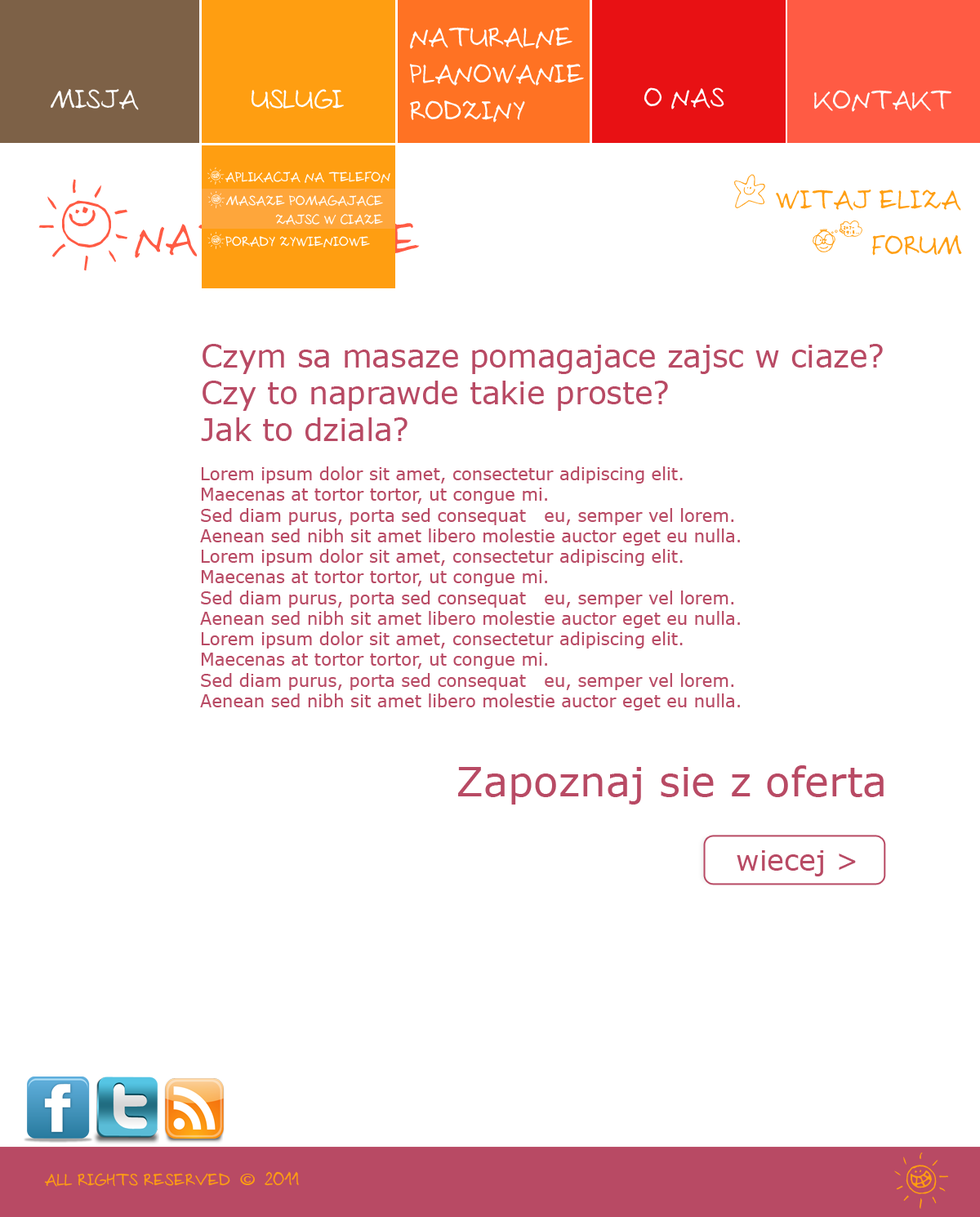
<style>
.page{position:relative;width:980px;height:1217px;background:#ffffff}
.page>*{position:absolute;margin:0}
.t1{font:30.6px "Sloneczko";color:#ffffff}
.t2{font:30.6px "Sloneczko";color:#fdfdfd}
.t3{font:15.6px "Sloneczko";color:#ffffff}
.t4{font:30.6px "Sloneczko";color:#ff9e11}
.t5{font:37.4px "Sloneczko";color:#ff9e11}
.t6{font:50.1px "Sloneczko"}
.t7{font:81.7px "Sloneczko"}
.t8{font:30.6px "Verdana";color:#b84a64}
.t9{font:17.3px "Verdana";color:#b84a64}
.t10{font:40.8px "Verdana";color:#b84a64}
.t11{font:28.4px "Verdana";color:#b84a64}
.t12{font:50.6px "Sloneczko";color:#ff9e11}
.t13{font:19.2px "Sloneczko";color:#ff9e11}
.t14{font:19.2px "CacophonyLoud";color:#ff9e11}
</style>
<div class="page">
<p class="t1" style="left:409px;top:27px;width:175px;height:95px">naturalne<br>planowanie<br>rodziny</p>
<p class="t1" style="left:51px;top:89px;width:88px;height:21px">misja</p>
<p class="t1" style="left:251px;top:89px;width:93px;height:20px">uslugi</p>
<p class="t1" style="left:644px;top:87px;width:80px;height:22px">o nas</p>
<p class="t2" style="left:814px;top:90px;width:137px;height:22px">kontakt</p>
<p class="t3" style="left:207px;top:167px;width:183px;height:18px">*aplikacja na telefon</p>
<p class="t4" style="left:734px;top:174px;width:227px;height:37px"><span class="t5">L</span> witaj eliza</p>
<p class="t6" style="left:38px;top:179px;width:382px;height:92px"><span class="t7">A</span>naturalnie</p>
<p class="t3" style="left:207px;top:191px;width:176px;height:34px;text-align:right">*masaze pomagajace<br>zajsc w ciaze</p>
<p class="t4" style="left:813px;top:220px;width:149px;height:36px"><span class="t5">S</span> forum</p>
<p class="t3" style="left:207px;top:231px;width:163px;height:18px">*porady zywieniowe</p>
<p class="t8" style="left:201px;top:344px;width:682px;height:97px">Czym sa masaze pomagajace zajsc w ciaze?<br>Czy to naprawde takie proste?<br>Jak to dziala?</p>
<p class="t9" style="left:200px;top:466px;width:540px;height:80px">Lorem ipsum dolor sit amet, consectetur adipiscing elit. <br>Maecenas at tortor tortor, ut congue mi. <br>Sed diam purus, porta sed consequat   eu, semper vel lorem. <br>Aenean sed nibh sit amet libero molestie auctor eget eu nulla.</p>
<p class="t9" style="left:200px;top:549px;width:540px;height:79px">Lorem ipsum dolor sit amet, consectetur adipiscing elit. <br>Maecenas at tortor tortor, ut congue mi. <br>Sed diam purus, porta sed consequat   eu, semper vel lorem. <br>Aenean sed nibh sit amet libero molestie auctor eget eu nulla.</p>
<p class="t9" style="left:200px;top:631px;width:540px;height:79px">Lorem ipsum dolor sit amet, consectetur adipiscing elit. <br>Maecenas at tortor tortor, ut congue mi. <br>Sed diam purus, porta sed consequat   eu, semper vel lorem. <br>Aenean sed nibh sit amet libero molestie auctor eget eu nulla.</p>
<p class="t10" style="left:458px;top:765px;width:426px;height:39px">Zapoznaj sie z oferta</p>
<p class="t11" style="left:737px;top:850px;width:119px;height:26px">wiecej &gt;</p>
<p class="t12" style="left:894px;top:1152px;width:54px;height:57px">Z</p>
<p class="t13" style="left:44px;top:1171px;width:255px;height:16px">all rights reserved <span class="t14">© </span>2011</p>
</div>
